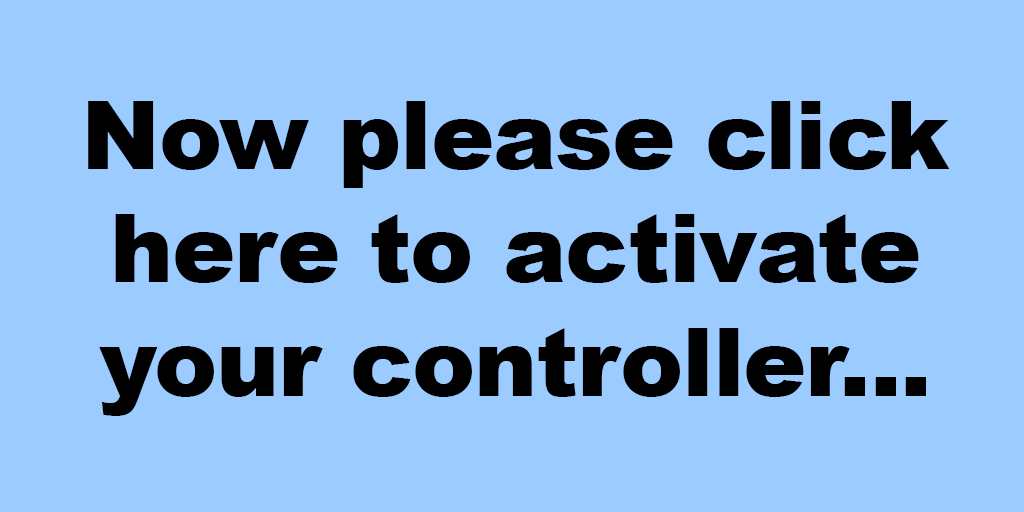
<style>
.page{position:relative;width:1024px;height:512px;background:#9ccbff}
.page>*{position:absolute;margin:0}
.t1{font:94.6px "Arial-Black";letter-spacing:-0.01em;color:#000000}
</style>
<div class="page">
<p class="t1" style="left:88px;top:101px;width:862px;height:315px;text-align:center">Now please click<br>here to activate<br>your controller...</p>
</div>
